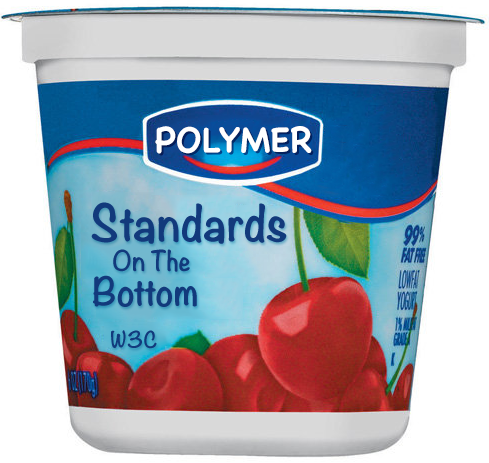
<style>
.page{position:relative;width:489px;height:463px;background:#ffffff}
.page>*{position:absolute;margin:0}
.t1{font:35px "Chalkboard-Bold";color:#ffffff;text-transform:uppercase}
.t2{font:45px "Noteworthy-Bold";color:#123a7c}
.t3{font:25px "Noteworthy-Bold";color:#123a7c}
.t4{font:35px "Noteworthy-Bold";color:#123a7c}
.t5{font:20px "Noteworthy-Bold";color:#123a7c}
</style>
<div class="page">
<p class="t1" style="left:155px;top:126px;width:157px;height:28px">Polymer</p>
<p class="t2" style="left:91px;top:202px;width:196px;height:42px">Standards</p>
<p class="t3" style="left:113px;top:249px;width:77px;height:23px">On The</p>
<p class="t4" style="left:93px;top:275px;width:104px;height:32px">Bottom</p>
<p class="t5" style="left:111px;top:330px;width:46px;height:19px">W3C</p>
</div>
